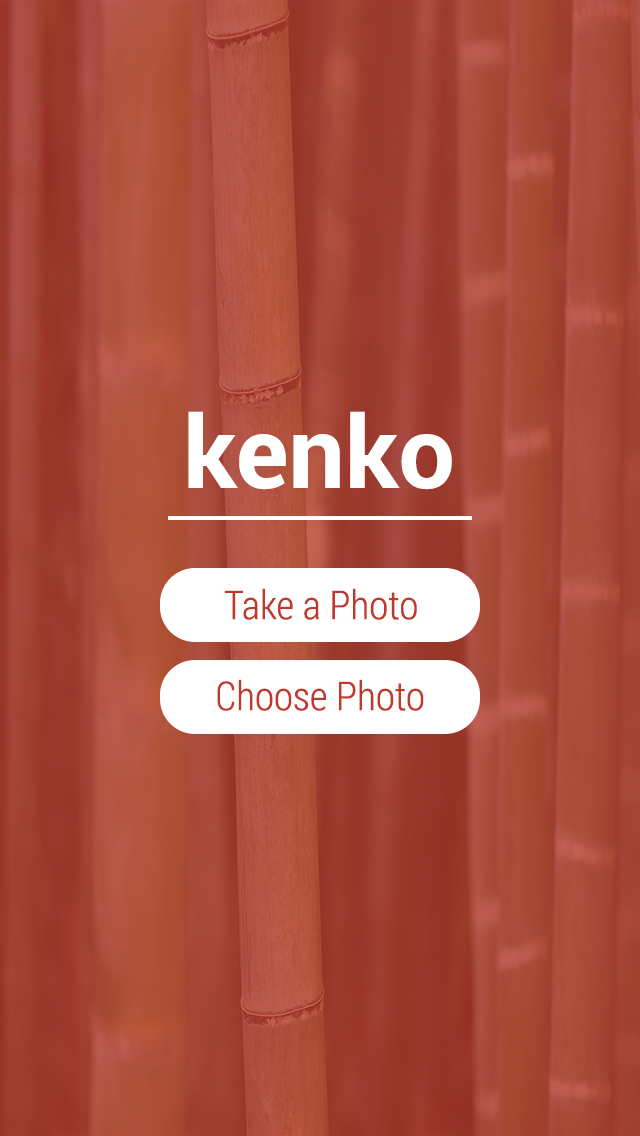
<style>
.page{position:relative;width:640px;height:1136px}
.page>*{position:absolute;margin:0}
.t1{font:100px "Roboto-Bold";color:#ffffff}
.t2{font:40px "RobotoCondensed-Light";color:#c0392b}
</style>
<div class="page">
<p class="t1" style="left:188px;top:411px;width:264px;height:79px">kenko</p>
<p class="t2" style="left:224px;top:588px;width:193px;height:32px">Take a Photo</p>
<p class="t2" style="left:217px;top:679px;width:207px;height:32px">Choose Photo</p>
</div>
